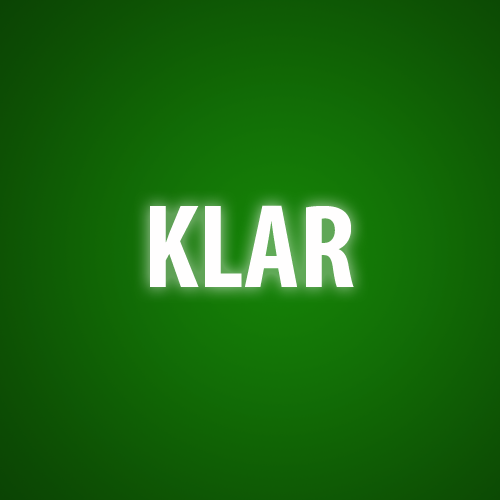
<style>
.page{position:relative;width:500px;height:500px}
.page>*{position:absolute;margin:0}
.t1{font:120px "MyriadPro-BoldCond";color:#fffefe}
</style>
<div class="page">
<p class="t1" style="left:150px;top:205px;width:204px;height:82px">KLAR</p>
</div>
